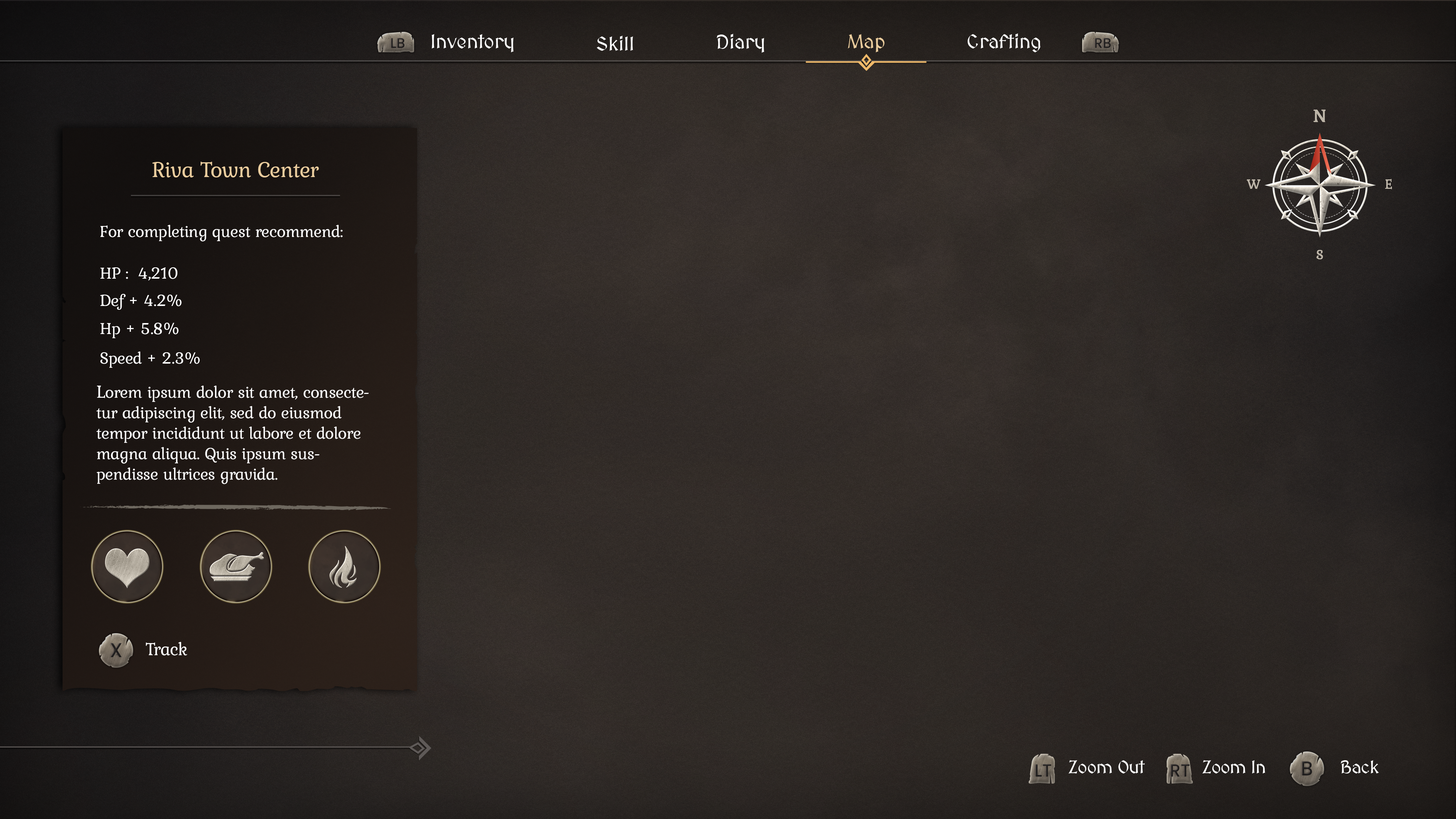
<style>
.page{position:relative;width:1456px;height:819px}
.page>*{position:absolute;margin:0}
.t1{font:19.8px "MedievalSharp";color:#ffffff}
.t2{font:19.8px "MedievalSharp";color:#ebcd9e}
.t3{font:18.2px "Kurale-Regular";color:#bcb4a7;font-weight:bold}
.t4{font:22.7px "Kurale-Regular";letter-spacing:-0.02em;color:#ebcd9e}
.t5{font:13.6px "Kurale-Regular";color:#bcb4a7;font-weight:bold}
.t6{font:17.1px "Kurale-Regular";letter-spacing:-0.02em;color:#ffffff}
.t7{font:18.2px "Kurale-Regular";letter-spacing:-0.02em;color:#ffffff}
.t8{font:18.2px "MedievalSharp";letter-spacing:-0.02em;color:#ffffff}
</style>
<div class="page">
<p class="t1" style="left:431px;top:34px;width:83px;height:18px">Inventory</p>
<p class="t1" style="left:597px;top:36px;width:36px;height:15px">Skill</p>
<p class="t1" style="left:717px;top:34px;width:47px;height:19px">Diary</p>
<p class="t2" style="left:848px;top:34px;width:37px;height:18px">Map</p>
<p class="t1" style="left:968px;top:33px;width:72px;height:19px">Crafting</p>
<p class="t3" style="left:1313px;top:110px;width:13px;height:12px">N</p>
<p class="t4" style="left:152px;top:162px;width:167px;height:15px">Riva Town Center</p>
<p class="t5" style="left:1247px;top:179px;width:13px;height:10px">W</p>
<p class="t5" style="left:1385px;top:179px;width:7px;height:10px">E</p>
<p class="t6" style="left:100px;top:225px;width:243px;height:17px">For completing quest recommend:</p>
<p class="t5" style="left:1316px;top:250px;width:7px;height:9px">S</p>
<p class="t6" style="left:100px;top:267px;width:77px;height:14px">HP :  4,210</p>
<p class="t6" style="left:100px;top:294px;width:82px;height:16px">Def + 4.2%</p>
<p class="t6" style="left:100px;top:323px;width:79px;height:15px">Hp + 5.8%</p>
<p class="t6" style="left:100px;top:351px;width:100px;height:17px">Speed + 2.3%</p>
<p class="t6" style="left:96px;top:386px;width:273px;height:98px"><span class="t7">L</span>orem ipsum dolor sit amet, consectetur adipiscing elit, sed do eiusmod tempor incididunt ut labore et dolore magna aliqua. Quis ipsum suspendisse ultrices gravida.</p>
<p class="t7" style="left:146px;top:642px;width:41px;height:14px">Track</p>
<p class="t8" style="left:1068px;top:760px;width:77px;height:13px">Zoom Out</p>
<p class="t8" style="left:1202px;top:760px;width:63px;height:13px">Zoom In</p>
<p class="t8" style="left:1341px;top:760px;width:38px;height:13px">Back</p>
</div>
